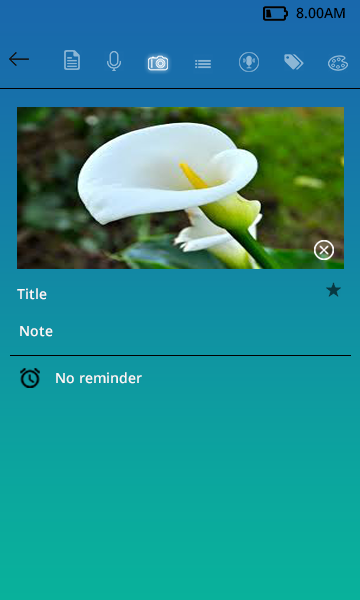
<style>
.page{position:relative;width:360px;height:600px}
.page>*{position:absolute;margin:0}
.t1{font:14px "OpenSans-Semibold";color:#000000}
.t2{font:14px "OpenSans-Semibold";color:#fbf8f8}
</style>
<div class="page">
<p class="t1" style="left:296px;top:7px;width:49px;height:12px">8.00AM</p>
<p class="t2" style="left:17px;top:288px;width:30px;height:12px">Title</p>
<p class="t2" style="left:20px;top:326px;width:33px;height:11px">Note</p>
<p class="t2" style="left:56px;top:372px;width:86px;height:12px">No reminder</p>
</div>
